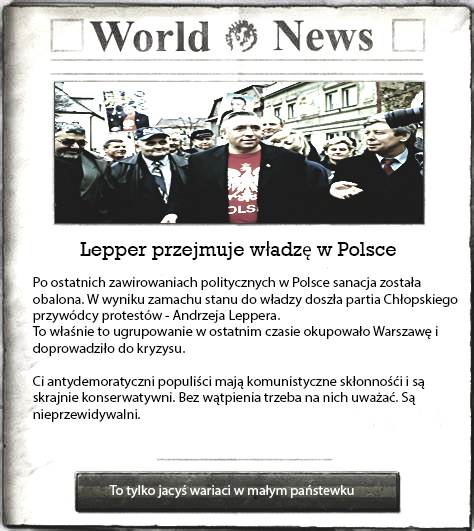
<style>
.page{position:relative;width:474px;height:531px;background:#ffffff}
.page>*{position:absolute;margin:0}
.t1{font:20px "Rockwell";color:#010100}
.t2{font:20px "MyriadPro-Regular";color:#010100}
.t3{font:13.7px "MyriadPro-Regular";color:#010100;scale:1.04 1}
.t4{font:14px "MyriadPro-Regular";color:#ffffff}
</style>
<div class="page">
<p class="t1" style="left:80px;top:241px;width:316px;height:19px">Lepper przejmuje w<span class="t2">ł</span>adz<span class="t2">ę</span> w Polsce</p>
<p class="t3" style="left:32px;top:277px;width:426px;height:145px">Po ostatnich zawirowaniach politycznych w Polsce sanacja została obalona. W wyniku zamachu stanu do władzy doszła partia Chłopskiego przywódcy protestów - Andrzeja Leppera.<br>To właśnie to ugrupowanie w ostatnim czasie okupowało Warszawę i doprowadziło do kryzysu.<br><br>Ci antydemoratyczni populiści mają komunistyczne skłonnośći i są skrajnie konserwatywni. Bez wątpienia trzeba na nich uważać. Są nieprzewidywalni.</p>
<p class="t4" style="left:109px;top:485px;width:245px;height:13px">To tylko jacyś wariaci w małym państewku</p>
</div>
